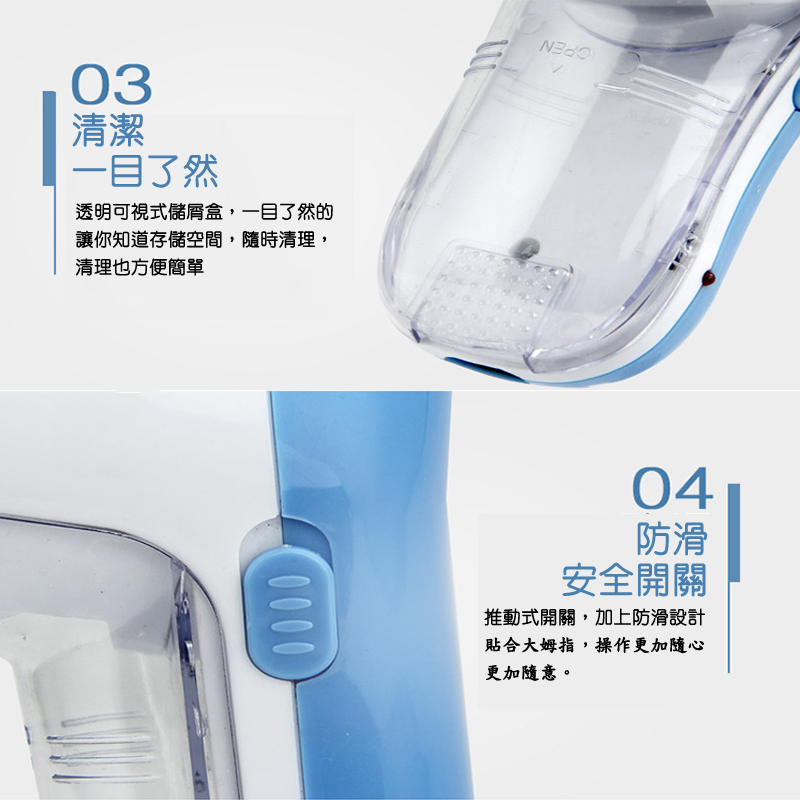
<style>
.page{position:relative;width:800px;height:800px}
.page>*{position:absolute;margin:0}
.t1{font:36px "HanWangYenLight";color:#4980af;font-weight:bold}
.t2{font:18px "HanWangYenLight";color:#000000;font-weight:bold}
.t3{font:18px "DFKaiShu-SB-Estd-BF";color:#000000;font-weight:bold}
</style>
<div class="page">
<p class="t1" style="left:72px;top:112px;width:146px;height:76px">清潔<br>一目了然</p>
<p class="t2" style="left:75px;top:203px;width:258px;height:73px">透明可視式儲屑盒，一目了然的<br>讓你知道存儲空間，隨時清理，<br>清理也方便簡單</p>
<p class="t1" style="left:562px;top:521px;width:146px;height:76px;text-align:right">防滑<br>安全開關</p>
<p class="t3" style="left:484px;top:608px;width:221px;height:73px"><span class="t2">推動式開關，加上防滑設計<br></span>貼合大姆指，操作更加隨心<br>更加隨意。</p>
</div>
